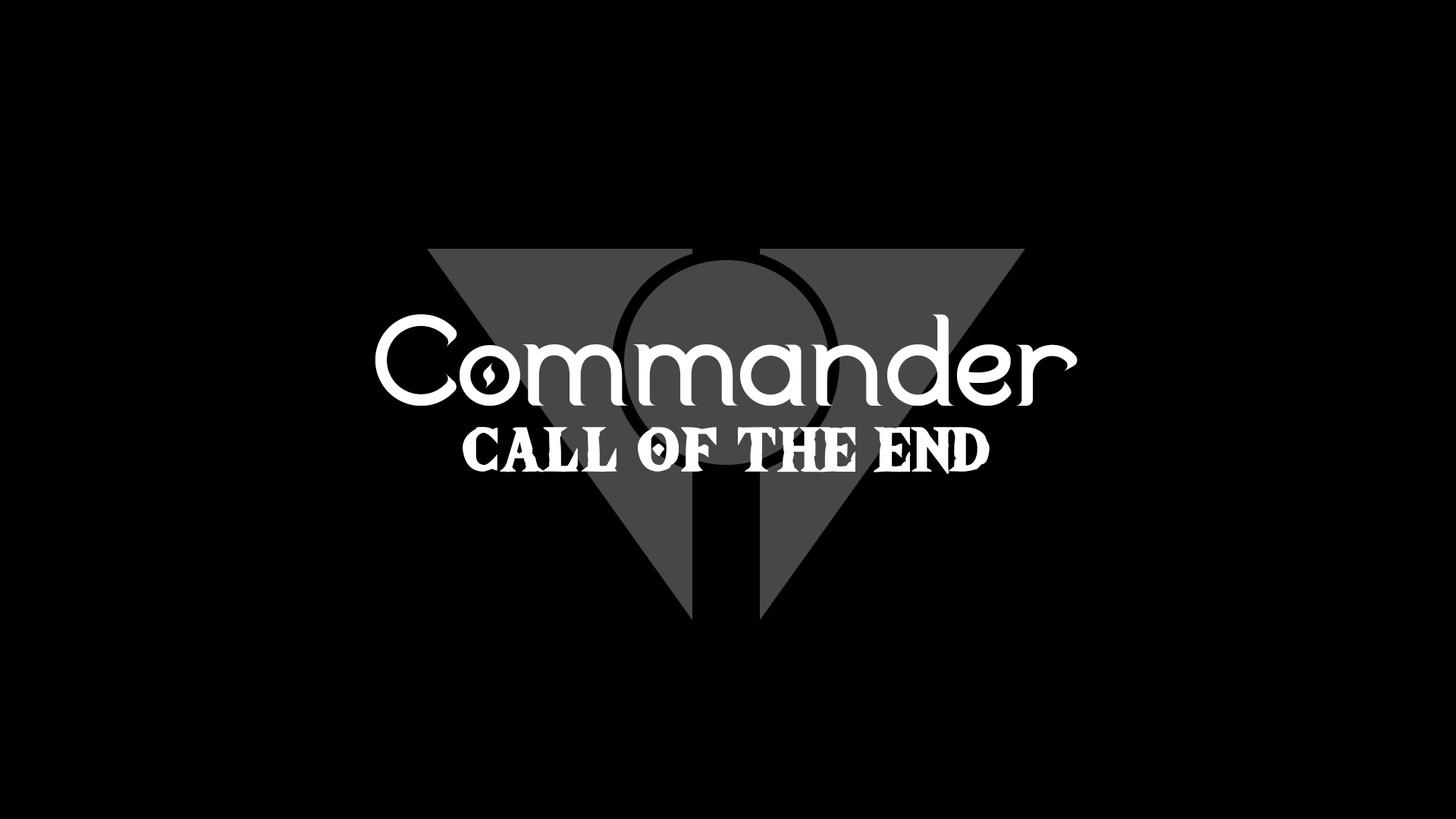
<style>
.page{position:relative;width:1456px;height:819px;background:#000000}
.page>*{position:absolute;margin:0}
.t1{font:130.1px "Duralith";color:#ffffff}
.t2{font:94.8px "TheWildBreathofZelda";color:#ffffff}
</style>
<div class="page">
<p class="t1" style="left:375px;top:314px;width:703px;height:92px">Commander</p>
<p class="t2" style="left:463px;top:427px;width:527px;height:47px">call of the end</p>
</div>
